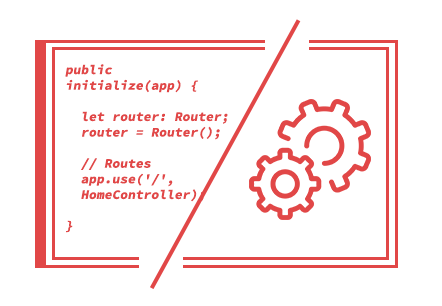
<style>
.page{position:relative;width:442px;height:306px;background:#ffffff}
.page>*{position:absolute;margin:0}
.t1{font:13px "SourceCodePro-Bold";color:#e14747;font-style:italic}
</style>
<div class="page">
<p class="t1" style="left:65px;top:64px;width:163px;height:169px">public initialize(app) {<br><br>  let router: Router;<br>  router = Router();<br><br>  // Routes<br>  app.use('/',           HomeController);<br><br>}</p>
</div>
